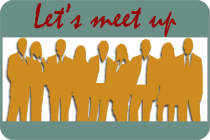
<style>
.page{position:relative;width:210px;height:140px;background:#ce8b1f}
.page>*{position:absolute;margin:0}
.t1{font:36px "Mistral";color:#960609}
</style>
<div class="page">
<p class="t1" style="left:34px;top:3px;width:143px;height:34px">Let’s meet up</p>
</div>
